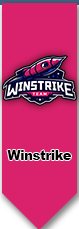
<style>
.page{position:relative;width:79px;height:229px;background:#d9226b}
.page>*{position:absolute;margin:0}
.t1{font:12.5px "Arial-Black";letter-spacing:-0.01em;color:#000000}
</style>
<div class="page">
<p class="t1" style="left:7px;top:150px;width:64px;height:10px">Winstrike</p>
</div>
